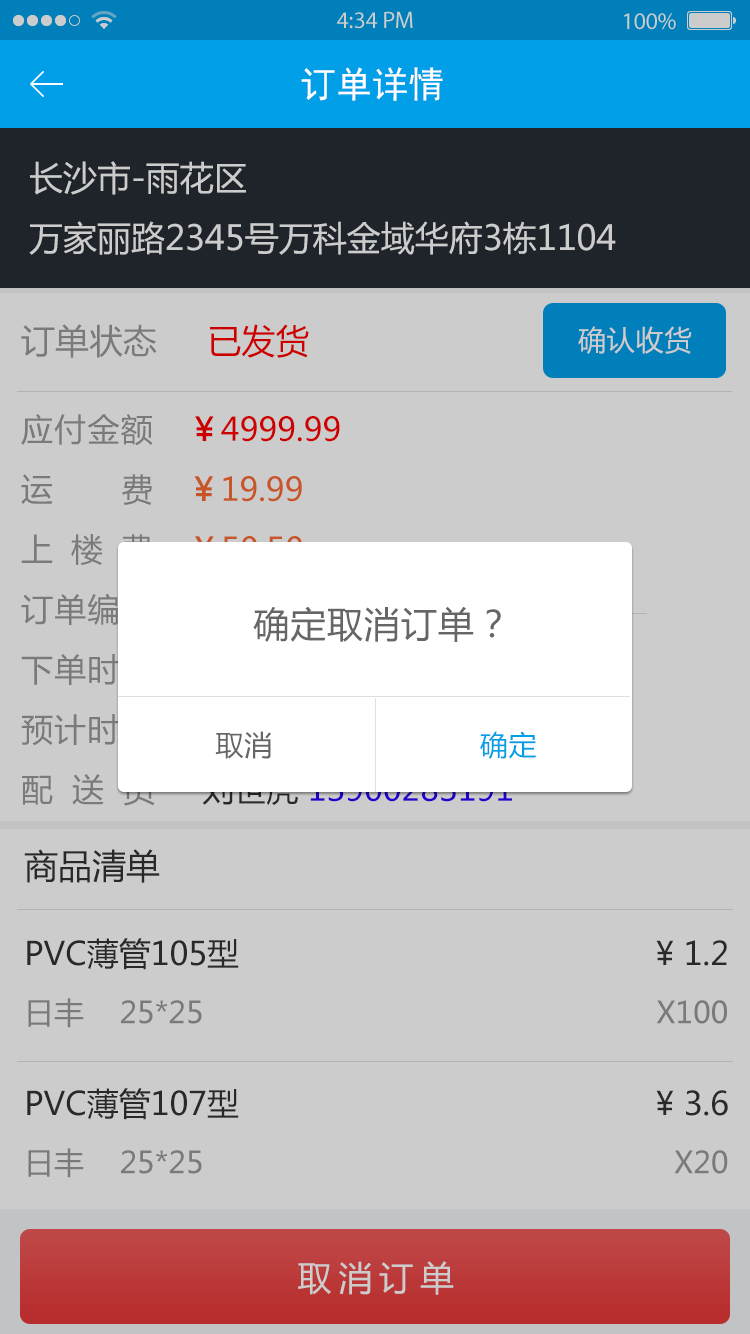
<style>
.page{position:relative;width:750px;height:1334px;background:#cccccc}
.page>*{position:absolute;margin:0}
.t1{font:36px "SimHei";color:#ffffff}
.t2{font:34px/60px "MicrosoftYaHei";color:#cccccc}
.t3{font:32px/30px "MicrosoftYaHei"}
.t4{font:34px "MicrosoftYaHei"}
.t5{font:32px/30px "MicrosoftYaHei";letter-spacing:0.04em}
.t6{font:32px/30px "MicrosoftYaHei";font-weight:bold}
.t7{font:32px/30px "MicrosoftYaHei";letter-spacing:0.19em}
.t8{font:32px/30px "MicrosoftYaHei";letter-spacing:0.13em}
.t9{font:28px "MicrosoftYaHei";letter-spacing:0.025em;color:#cccccc}
.t10{font:36px "MicrosoftYaHei";letter-spacing:0.025em;color:#666666}
.t11{font:28px "MicrosoftYaHei";letter-spacing:0.025em;color:#666666}
.t12{font:28px "MicrosoftYaHei";letter-spacing:0.025em;color:#009fe8}
.t13{font:34px "MicrosoftYaHei";color:#333333}
.t14{font:30px/60px "MicrosoftYaHei";color:#999999}
.t15{font:32px/60px "MicrosoftYaHei";color:#333333}
.t16{font:34px "MicrosoftYaHei";letter-spacing:0.2em;color:#cccccc}
</style>
<div class="page">
<p class="t1" style="left:301px;top:67px;width:142px;height:34px">订单详情</p>
<p class="t2" style="left:29px;top:161px;width:587px;height:94px">长沙市-雨花区<br>万家丽路2345号万科金域华府3栋1104</p>
<p class="t3" style="left:21px;top:324px;width:601px;height:482px"><span class="t4">订单状态     </span><span class="t4">已发货<br><br></span><span class="t5">应付金额    </span><span class="t6">￥</span>4999.99<br><br><span class="t7">运    费   </span><span class="t6">￥</span>19.99<br><br><span class="t8">上 楼 费    </span><span class="t6">￥</span>50.50<br><br><span class="t5">订单编号     </span>1531751831726  <br>     <br><span class="t5">下单时间     </span>2015-05-18 18:30:29<br><br><span class="t5">预计时间     </span>2015-05-19 21:30:00 前送达<br><br>配  送  员     刘世虎 13900283191</p>
<p class="t9" style="left:578px;top:326px;width:114px;height:28px">确认收货</p>
<p class="t10" style="left:253px;top:606px;width:248px;height:36px">确定取消订单？</p>
<p class="t11" style="left:215px;top:731px;width:322px;height:28px">取消<span class="t12">                       确定</span></p>
<p class="t13" style="left:24px;top:849px;width:136px;height:34px">商品清单</p>
<p class="t14" style="left:27px;top:938px;width:700px;height:90px"><span class="t15">PVC薄管105型                                            ¥ 1.2<br></span>日丰    25*25                                                   X100</p>
<p class="t14" style="left:27px;top:1088px;width:701px;height:90px"><span class="t15">PVC薄管107型                                            ¥ 3.6<br></span>日丰    25*25                                                     X20</p>
<p class="t16" style="left:298px;top:1261px;width:156px;height:34px">取消订单</p>
</div>
